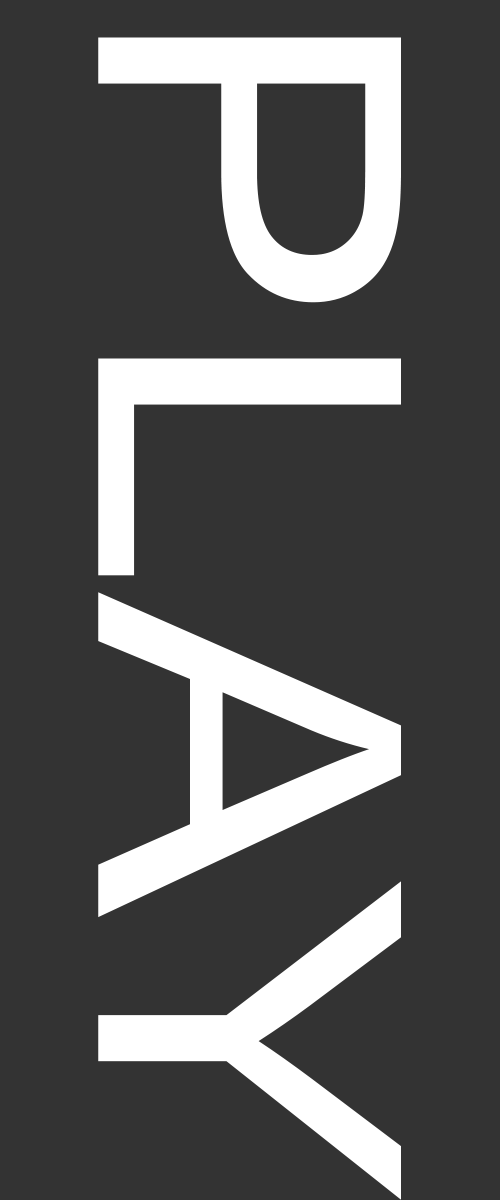
<style>
.page{position:relative;width:500px;height:1200px;background:#333333}
.page>*{position:absolute;margin:0}
.t1{font:422.7px "ArialMT";color:#ffffff;scale:1.15 1}
</style>
<div class="page">
<p class="t1" style="left:98px;top:37px;width:303px;height:1163px;rotate:90deg">PLAY</p>
</div>
